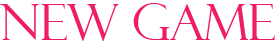
<style>
.page{position:relative;width:275px;height:44px;background:#ffffff}
.page>*{position:absolute;margin:0}
.t1{font:49.5px "FelixTitlingMT";color:#ef1e63}
</style>
<div class="page">
<p class="t1" style="left:0px;top:3px;width:275px;height:38px">new game</p>
</div>
